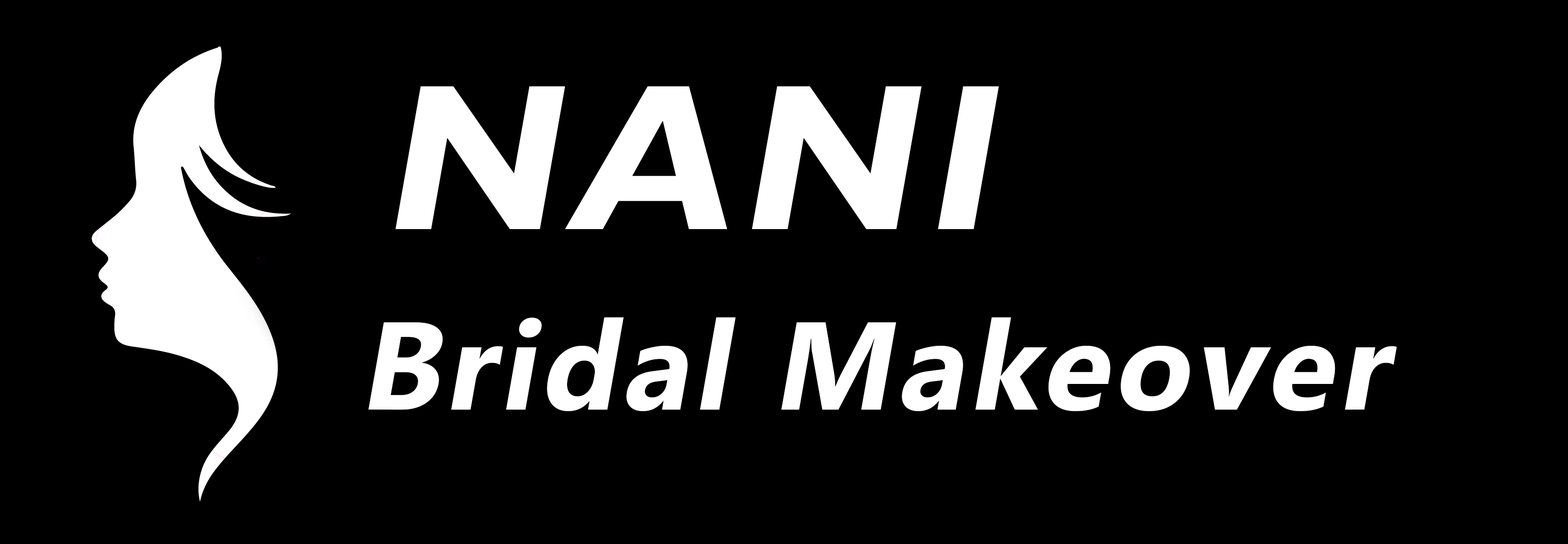
<style>
.page{position:relative;width:1568px;height:544px;background:#000000}
.page>*{position:absolute;margin:0}
.t1{font:209px "GillSansMT-Bold";letter-spacing:0.04em;color:#ffffff;font-style:italic}
.t2{font:124.4px "NirmalaUI-Bold";letter-spacing:0.04em;color:#ffffff;font-style:italic}
</style>
<div class="page">
<p class="t1" style="left:395px;top:86px;width:604px;height:143px">NANI</p>
<p class="t2" style="left:368px;top:317px;width:1029px;height:94px">Bridal Makeover</p>
</div>
